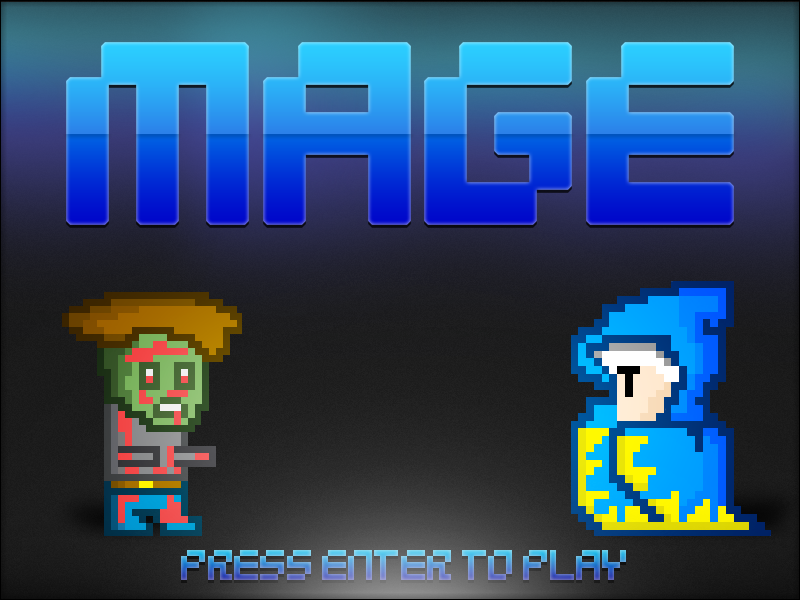
<style>
.page{position:relative;width:800px;height:600px}
.page>*{position:absolute;margin:0}
.t1{font:48px "5Mikropix";letter-spacing:-0.075em}
</style>
<div class="page">
<p class="t1" style="left:181px;top:550px;width:445px;height:30px">PRESS ENTER TO PLAY</p>
</div>
